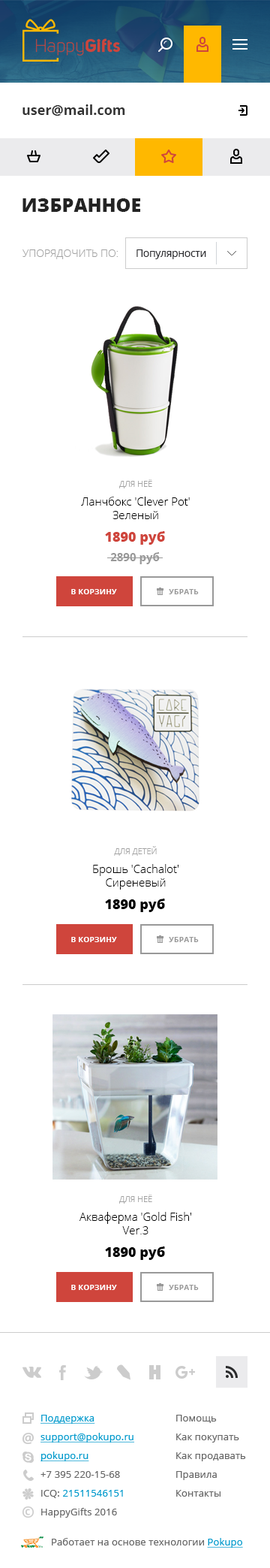
<style>
.page{position:relative;width:270px;height:1568px;background:#ffffff}
.page>*{position:absolute;margin:0}
.t1{font:13.5px "OpenSans-Bold";color:#333333}
.t2{font:18.8px "OpenSans-Extrabold";color:#232323;text-transform:uppercase}
.t3{font:10.5px "OpenSans-Light";color:#a3a3a3;text-transform:uppercase}
.t4{font:10.5px "OpenSans";letter-spacing:-0.025em;color:#28282c}
.t5{font:8.3px "OpenSans-Light";color:#a3a3a3;text-transform:uppercase}
.t6{font:11.3px/13.5px "OpenSans-Light";color:#000000}
.t7{font:13.5px/19.5px "OpenSans-Extrabold";color:#cf453c}
.t8{font:11.3px/19.5px "OpenSans-Bold";color:#999999}
.t9{font:7.5px "OpenSans-Bold";letter-spacing:0.025em;color:#ffffff;text-transform:uppercase}
.t10{font:7.5px "OpenSans-Bold";letter-spacing:0.025em;color:#999999;text-transform:uppercase}
.t11{font:13.5px "OpenSans-Extrabold";color:#000000}
</style>
<div class="page">
<p class="t1" style="left:23px;top:104px;width:102px;height:12px">user@mail.com</p>
<p class="t2" style="left:23px;top:198px;width:117px;height:14px">Избранное</p>
<p class="t3" style="left:23px;top:249px;width:95px;height:10px">упорядочить по:</p>
<p class="t4" style="left:137px;top:249px;width:70px;height:10px">Популярности</p>
<p class="t5" style="left:119px;top:479px;width:34px;height:9px">для неё</p>
<p class="t6" style="left:81px;top:497px;width:109px;height:22px;text-align:center">Ланчбокс 'Clever Pot'<br>Зеленый</p>
<p class="t7" style="left:105px;top:531px;width:60px;height:33px;text-align:center">1890 руб<br><span class="t8">2890 руб</span></p>
<p class="t9" style="left:71px;top:589px;width:46px;height:5px">в корзину</p>
<p class="t10" style="left:169px;top:589px;width:30px;height:5px">Убрать</p>
<p class="t5" style="left:114px;top:846px;width:43px;height:10px">для детей</p>
<p class="t6" style="left:93px;top:864px;width:86px;height:26px;text-align:center">Брошь 'Cachalot'<br>Сиреневый</p>
<p class="t11" style="left:105px;top:899px;width:60px;height:13px">1890 руб</p>
<p class="t9" style="left:71px;top:937px;width:46px;height:5px">в корзину</p>
<p class="t10" style="left:169px;top:937px;width:30px;height:5px">Убрать</p>
<p class="t5" style="left:119px;top:1195px;width:34px;height:9px">для неё</p>
<p class="t6" style="left:80px;top:1212px;width:112px;height:22px;text-align:center">Акваферма 'Gold Fish'<br>Ver.3</p>
<p class="t11" style="left:105px;top:1246px;width:60px;height:14px">1890 руб</p>
<p class="t9" style="left:71px;top:1285px;width:46px;height:5px">в корзину</p>
<p class="t10" style="left:169px;top:1285px;width:30px;height:5px">Убрать</p>
</div>
